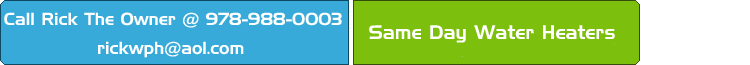
<style>
.page{position:relative;width:750px;height:65px;background:#37aad9}
.page>*{position:absolute;margin:0}
.t1{font:17px "HandelGothic";color:#ffffff}
.t2{font:19px "HandelGothic";color:#ffffff}
</style>
<div class="page">
<p class="t1" style="left:4px;top:12px;width:338px;height:16px">Call Rick The Owner @ 978-988-0003</p>
<p class="t2" style="left:369px;top:25px;width:246px;height:18px">Same Day Water Heaters</p>
</div>
